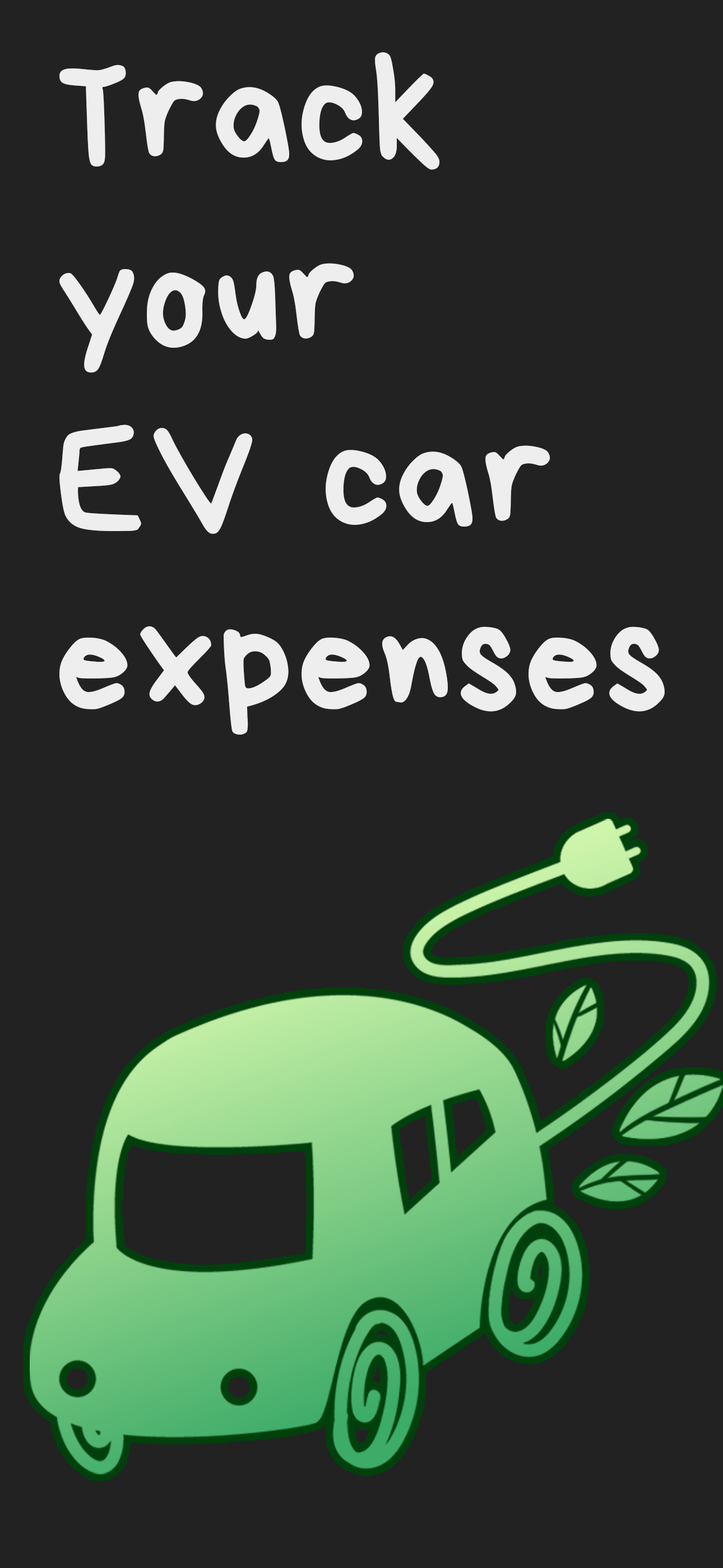
<style>
.page{position:relative;width:723px;height:1568px;background:#222222}
.page>*{position:absolute;margin:0}
.t1{font:151.9px "Bryndan-Write";letter-spacing:0.025em;color:#eeeeee}
</style>
<div class="page">
<p class="t1" style="left:59px;top:52px;width:606px;height:683px">Track<br>your<br>EV car<br>expenses</p>
</div>
